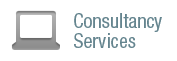
<style>
.page{position:relative;width:177px;height:61px;background:#ffffff}
.page>*{position:absolute;margin:0}
.t1{font:19.9px/19.9px "HelveticaNeueLTPro-Cn";color:#65858f}
</style>
<div class="page">
<p class="t1" style="left:74px;top:13px;width:88px;height:35px">Consultancy<br>Services</p>
</div>
